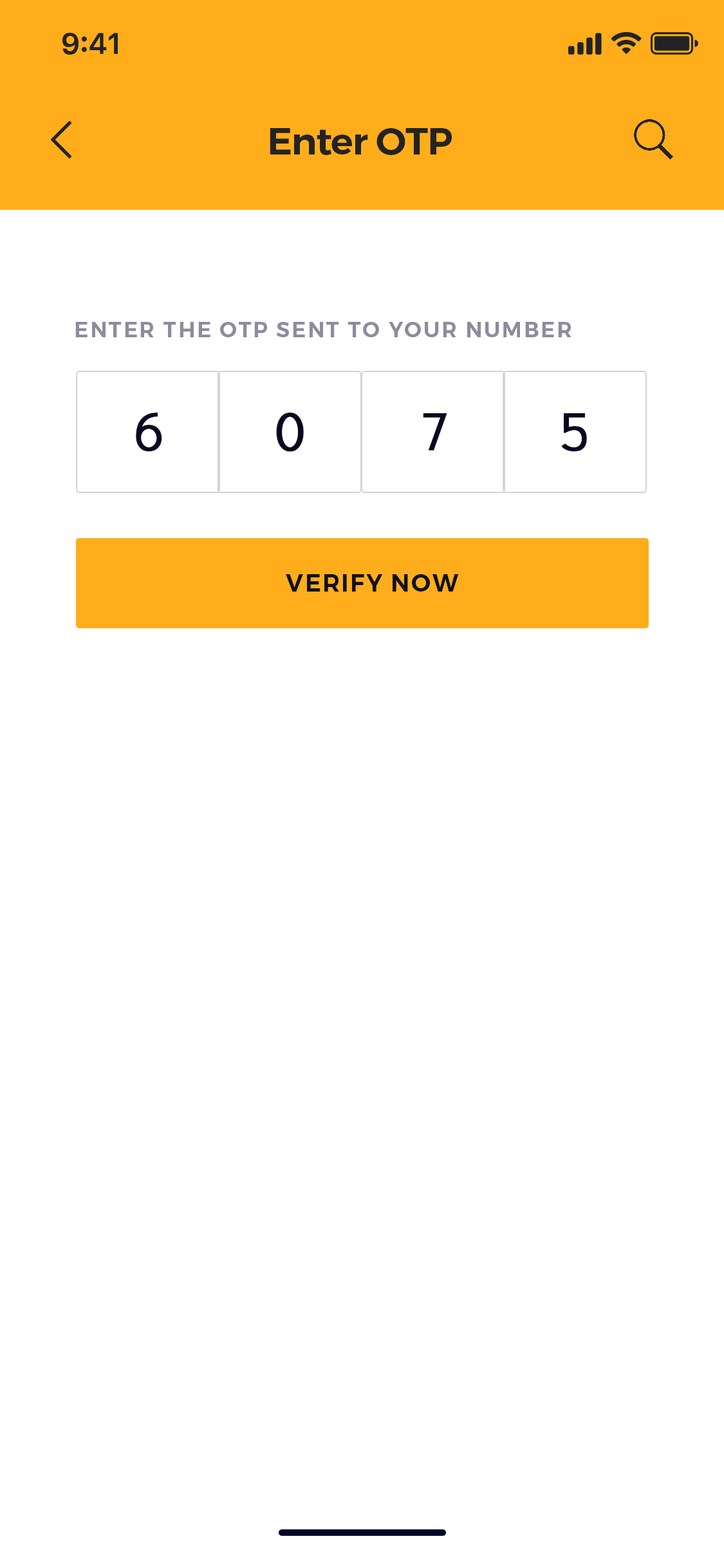
<style>
.page{position:relative;width:724px;height:1568px;background:#ffffff}
.page>*{position:absolute;margin:0}
.t1{font:37.5px "Montserrat-SemiBold";letter-spacing:-0.02em;color:#232323}
.t2{font:21.5px "Montserrat-SemiBold";letter-spacing:0.08em;color:#8f8b9e;text-transform:uppercase}
.t3{font:53.6px "DidactGothic-Regular";color:#0c0720;font-weight:bold}
.t4{font:24.1px "Montserrat-SemiBold";letter-spacing:0.06em;color:#0e1020;text-transform:uppercase}
</style>
<div class="page">
<p class="t1" style="left:270px;top:128px;width:182px;height:27px">Enter OTP</p>
<p class="t2" style="left:75px;top:322px;width:497px;height:15px">enter the otp sent to your number</p>
<p class="t3" style="left:136px;top:413px;width:26px;height:39px">6</p>
<p class="t3" style="left:276px;top:413px;width:28px;height:39px">0</p>
<p class="t3" style="left:423px;top:413px;width:24px;height:38px">7</p>
<p class="t3" style="left:561px;top:413px;width:26px;height:39px">5</p>
<p class="t4" style="left:286px;top:574px;width:173px;height:18px">Verify now</p>
</div>
